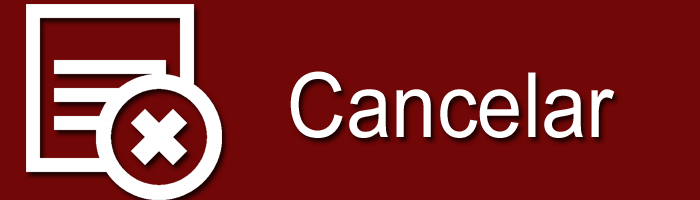
<style>
.page{position:relative;width:700px;height:200px;background:#710707}
.page>*{position:absolute;margin:0}
.t1{font:90px "ArialMT";color:#ffffff;scale:0.9 1}
</style>
<div class="page">
<p class="t1" style="left:290px;top:71px;width:325px;height:67px">Cancelar</p>
</div>
